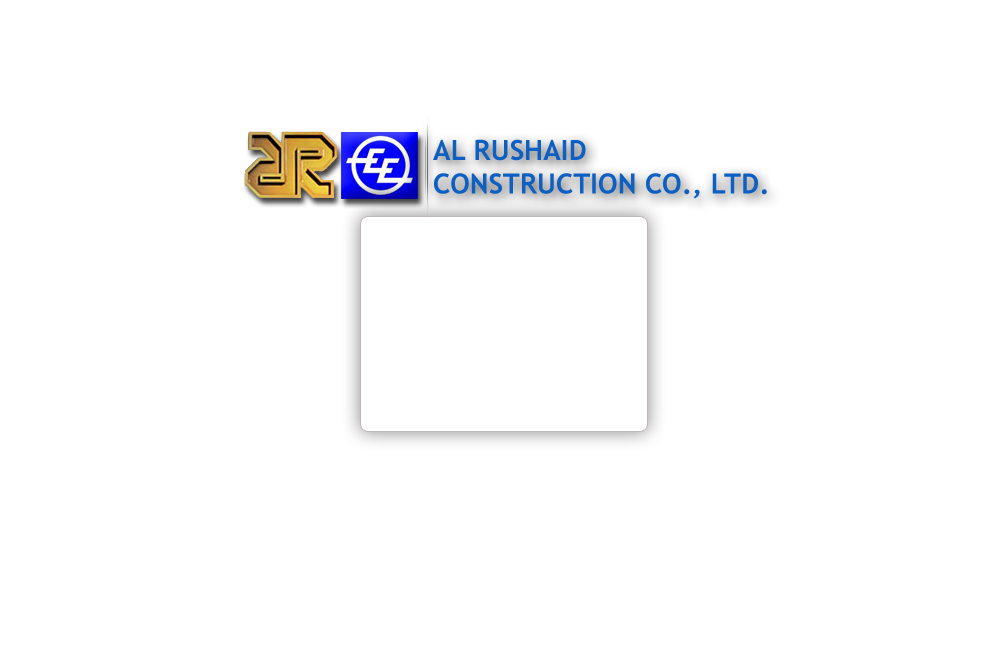
<style>
.page{position:relative;width:1003px;height:654px;background:#ffffff}
.page>*{position:absolute;margin:0}
.t1{font:28px "TrebuchetMS-Bold";color:#0e5fc2}
</style>
<div class="page">
<p class="t1" style="left:433px;top:139px;width:334px;height:60px">AL RUSHAID <br>CONSTRUCTION CO., LTD.</p>
</div>
